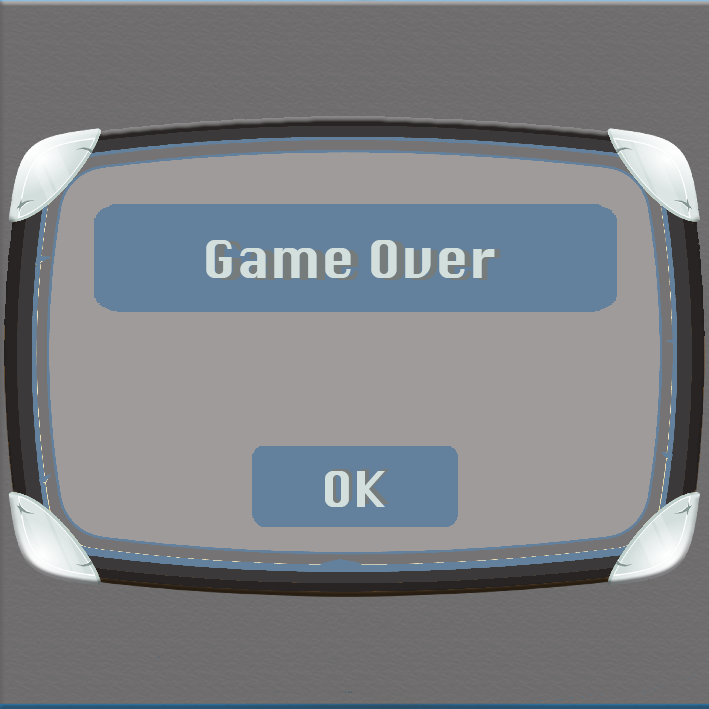
<style>
.page{position:relative;width:709px;height:709px;background:#a09b9b}
.page>*{position:absolute;margin:0}
.t1{font:50.9px "Silom";color:#d3dfdd}
.t2{font:52.1px "Silom";color:#757c7b;scale:0.96 1}
.t3{font:47.9px "Silom";color:#d3dfdd}
</style>
<div class="page">
<p class="t1" style="left:206px;top:240px;width:289px;height:38px">Game Over</p>
<p class="t2" style="left:216px;top:241px;width:284px;height:39px">Game Over</p>
<p class="t3" style="left:325px;top:471px;width:60px;height:36px">OK</p>
</div>
